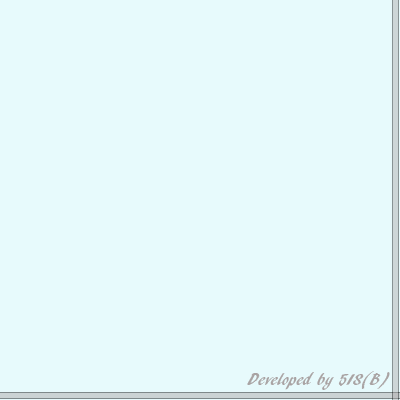
<style>
.page{position:relative;width:400px;height:400px;background:#e7fafc}
.page>*{position:absolute;margin:0}
.t1{font:17.3px "ARBLANCA";color:#a9a3a3}
</style>
<div class="page">
<p class="t1" style="left:247px;top:371px;width:143px;height:19px">Developed by 5IS(B)</p>
</div>
